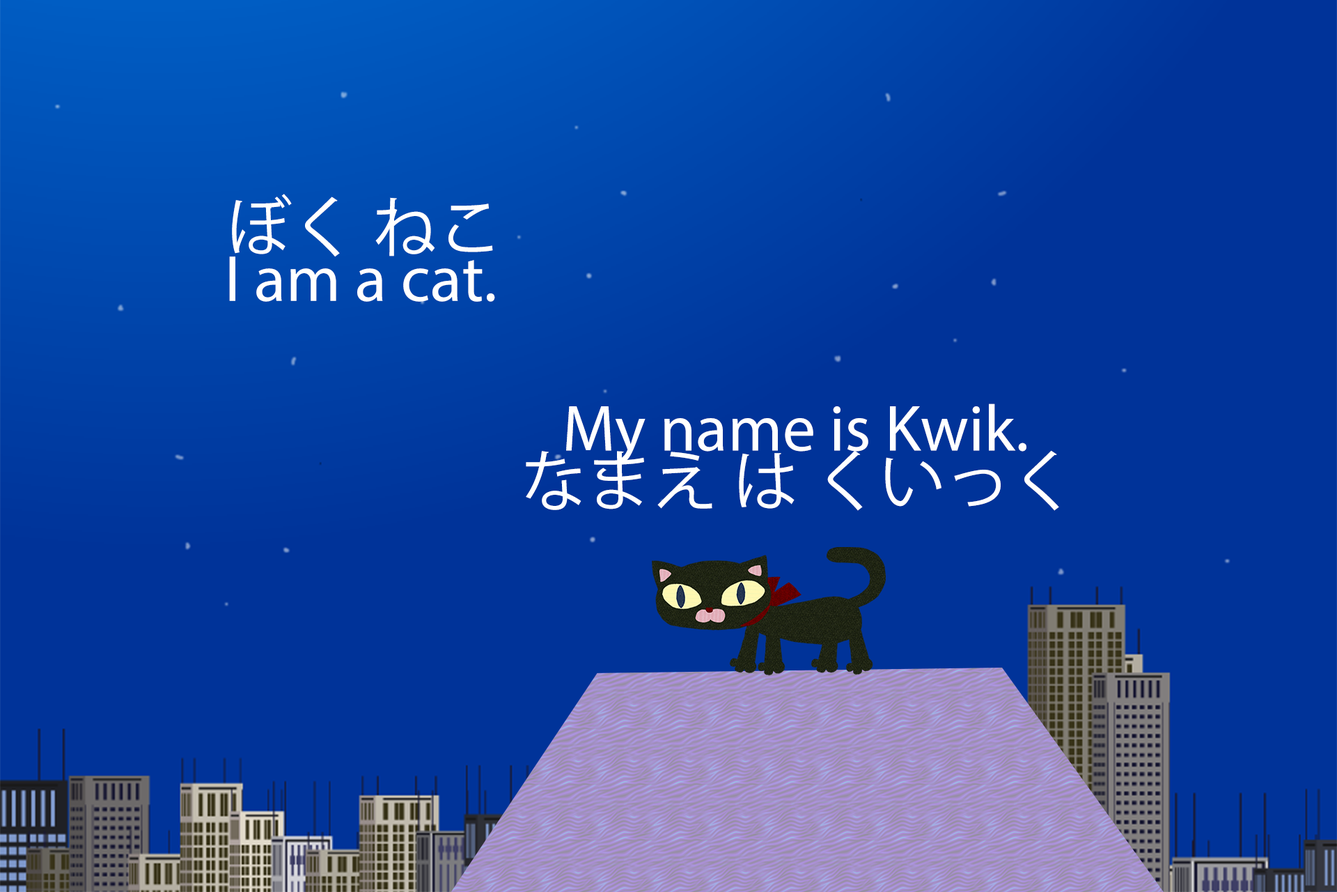
<style>
.page{position:relative;width:1337px;height:892px;background:#003399}
.page>*{position:absolute;margin:0}
.t1{font:65.5px "KozGoPr6N-Regular";color:#ffffff}
.t2{font:65.5px "MyriadPro-Regular";color:#ffffff}
</style>
<div class="page">
<p class="t1" style="left:232px;top:194px;width:261px;height:63px">ぼく ねこ</p>
<p class="t2" style="left:229px;top:256px;width:266px;height:46px">I am a cat.</p>
<p class="t2" style="left:566px;top:403px;width:461px;height:62px">My name is Kwik.</p>
<p class="t1" style="left:526px;top:450px;width:533px;height:61px">なまえ は くいっく</p>
</div>
